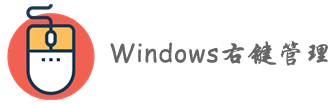
<style>
.page{position:relative;width:335px;height:104px;background:#ffffff}
.page>*{position:absolute;margin:0}
.t1{font:25.2px "ComicSansMS";letter-spacing:0.04em;color:#666666}
.t2{font:28.8px "STXingkai";letter-spacing:0.04em;color:#666666}
</style>
<div class="page">
<p class="t1" style="left:110px;top:40px;width:218px;height:26px">Windows<span class="t2">右键管理</span></p>
</div>
